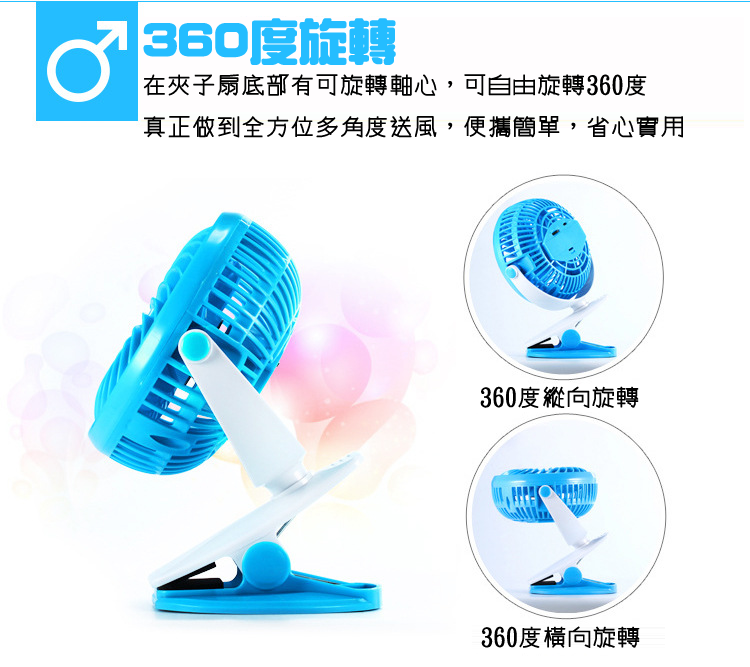
<style>
.page{position:relative;width:750px;height:667px;background:#ffffff}
.page>*{position:absolute;margin:0}
.t1{font:48px "HanWangZonYi";letter-spacing:-0.01em;color:#24bdff;font-weight:bold}
.t2{font:24px "winman-tun33014";letter-spacing:-0.01em;color:#000000;font-weight:bold}
</style>
<div class="page">
<p class="t1" style="left:143px;top:18px;width:253px;height:47px">360度旋轉</p>
<p class="t2" style="left:143px;top:74px;width:540px;height:64px">在夾子扇底部有可旋轉軸心，可自由旋轉360度<br>真正做到全方位多角度送風，便攜簡單，省心實用</p>
<p class="t2" style="left:480px;top:386px;width:159px;height:22px">360度縱向旋轉</p>
<p class="t2" style="left:481px;top:626px;width:159px;height:22px">360度橫向旋轉</p>
</div>
